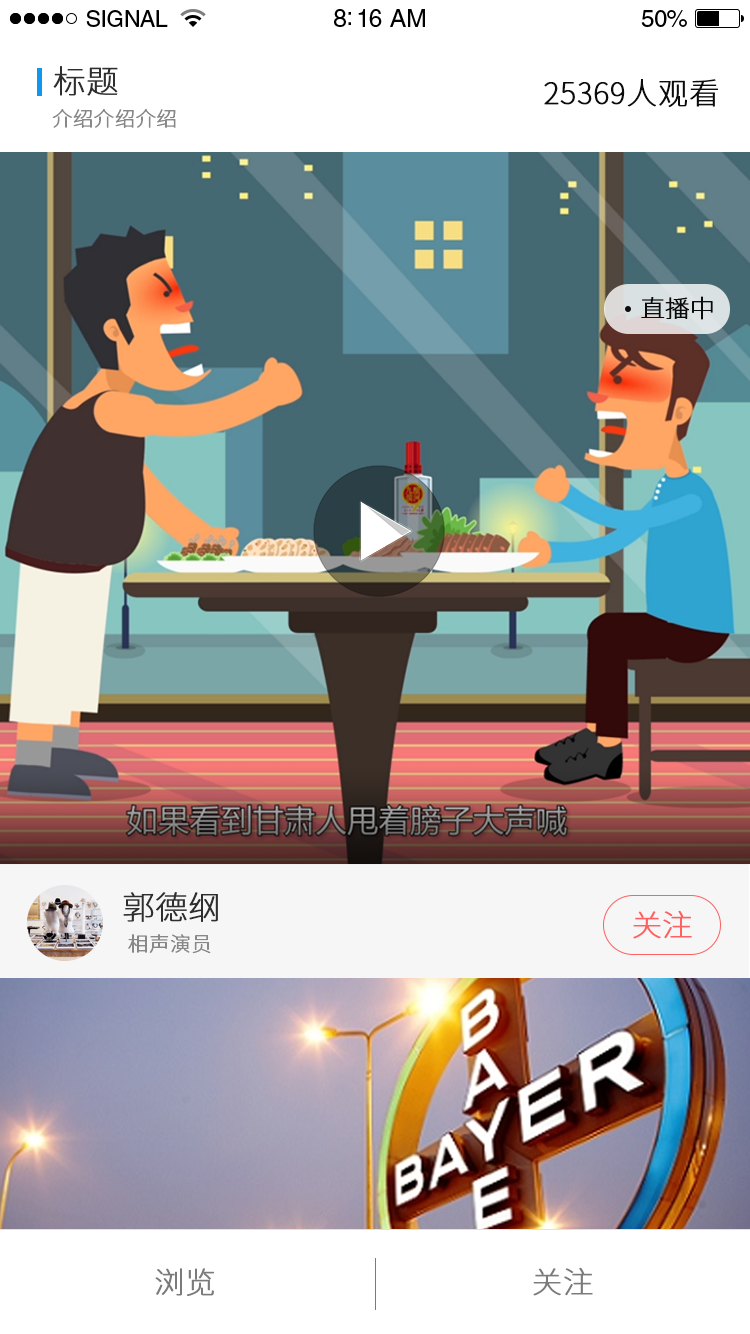
<style>
.page{position:relative;width:750px;height:1334px}
.page>*{position:absolute;margin:0}
.t1{font:23px "HelveticaLTStd-Roman";letter-spacing:-0.02em;color:#000000}
.t2{font:25px "HelveticaLTStd-Roman";letter-spacing:-0.02em;color:#000000}
.t3{font:24px "HelveticaLTStd-Roman";letter-spacing:-0.02em;color:#000000}
.t4{font:32px "SourceHanSansCN-ExtraLight";color:#2e2e2e;font-weight:bold}
.t5{font:30px "SourceHanSansCN-ExtraLight";color:#0c0c0c;font-weight:bold}
.t6{font:20px "SourceHanSansCN-ExtraLight";color:#888888;font-weight:bold}
.t7{font:24px "SourceHanSansCN-ExtraLight";color:#0c0c0c;font-weight:bold}
.t8{font:30px "SourceHanSansCN-ExtraLight";color:#ff6060;font-weight:bold}
.t9{font:30px "SourceHanSansCN-ExtraLight";color:#7b7b7b;font-weight:bold}
</style>
<div class="page">
<p class="t1" style="left:86px;top:10px;width:82px;height:17px">SIGNAL</p>
<p class="t2" style="left:334px;top:9px;width:91px;height:18px">8:16 AM</p>
<p class="t3" style="left:641px;top:10px;width:46px;height:17px">50%</p>
<p class="t4" style="left:53px;top:66px;width:65px;height:30px">标题</p>
<p class="t5" style="left:544px;top:79px;width:174px;height:28px">25369人观看</p>
<p class="t6" style="left:52px;top:109px;width:124px;height:19px">介绍介绍介绍</p>
<p class="t7" style="left:641px;top:296px;width:72px;height:24px">直播中</p>
<p class="t4" style="left:123px;top:892px;width:95px;height:30px">郭德纲</p>
<p class="t8" style="left:633px;top:910px;width:59px;height:29px">关注</p>
<p class="t6" style="left:128px;top:934px;width:83px;height:20px">相声演员</p>
<p class="t9" style="left:155px;top:1268px;width:59px;height:28px">浏览</p>
<p class="t9" style="left:533px;top:1267px;width:60px;height:29px">关注</p>
</div>
